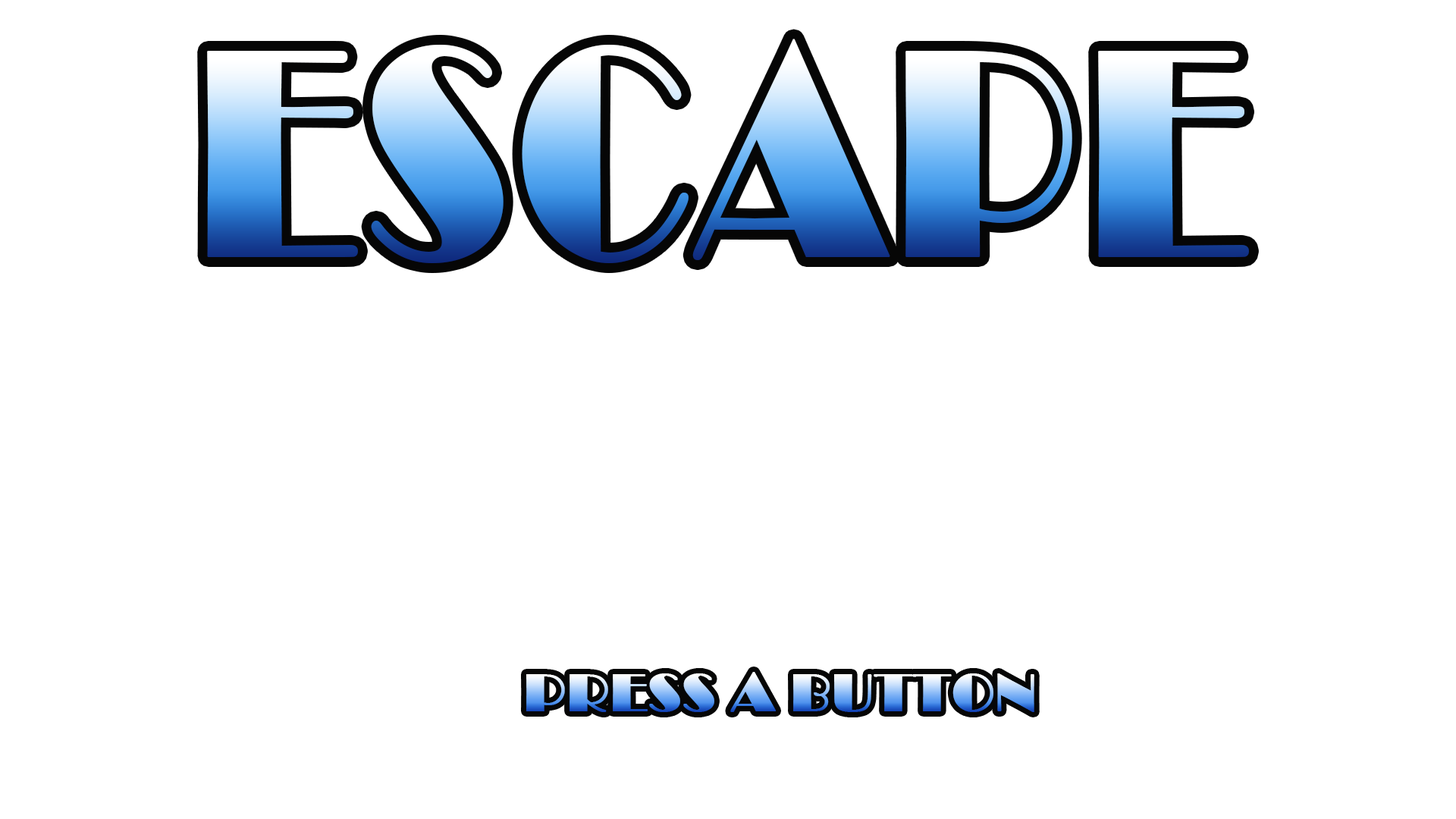
<style>
.page{position:relative;width:1456px;height:819px;background:#ffffff}
.page>*{position:absolute;margin:0}
.t1{font:54.6px "Broadway";font-weight:bold}
</style>
<div class="page">
<p class="t1" style="left:526px;top:672px;width:508px;height:40px">PRESS A BUTTON</p>
</div>
